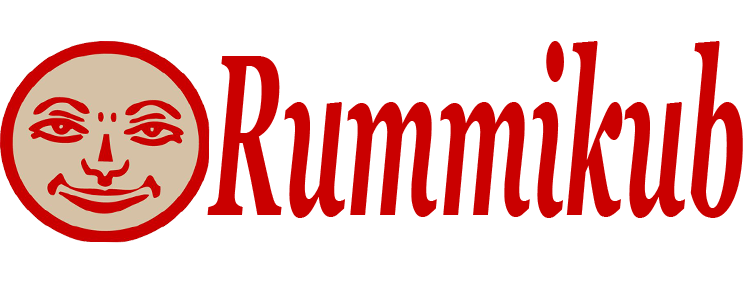
<style>
.page{position:relative;width:750px;height:300px;background:#ffffff}
.page>*{position:absolute;margin:0}
.t1{font:230px "Georgia-BoldItalic";color:#ca0000;scale:0.4 1}
</style>
<div class="page">
<p class="t1" style="left:207px;top:41px;width:536px;height:177px">Rummikub</p>
</div>
